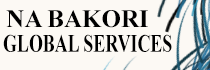
<style>
.page{position:relative;width:210px;height:70px;background:#fcf9f4}
.page>*{position:absolute;margin:0}
.t1{font:25px "TimesNewRomanPS-BoldMT";color:#000000;text-transform:uppercase}
.t2{font:25px "TimesNewRomanPS-BoldMT";color:#000000;text-transform:uppercase;scale:0.72 1}
</style>
<div class="page">
<p class="t1" style="left:6px;top:10px;width:142px;height:18px">NA BAKORI</p>
<p class="t2" style="left:3px;top:34px;width:169px;height:18px">GLOBAL SERVICES</p>
</div>
